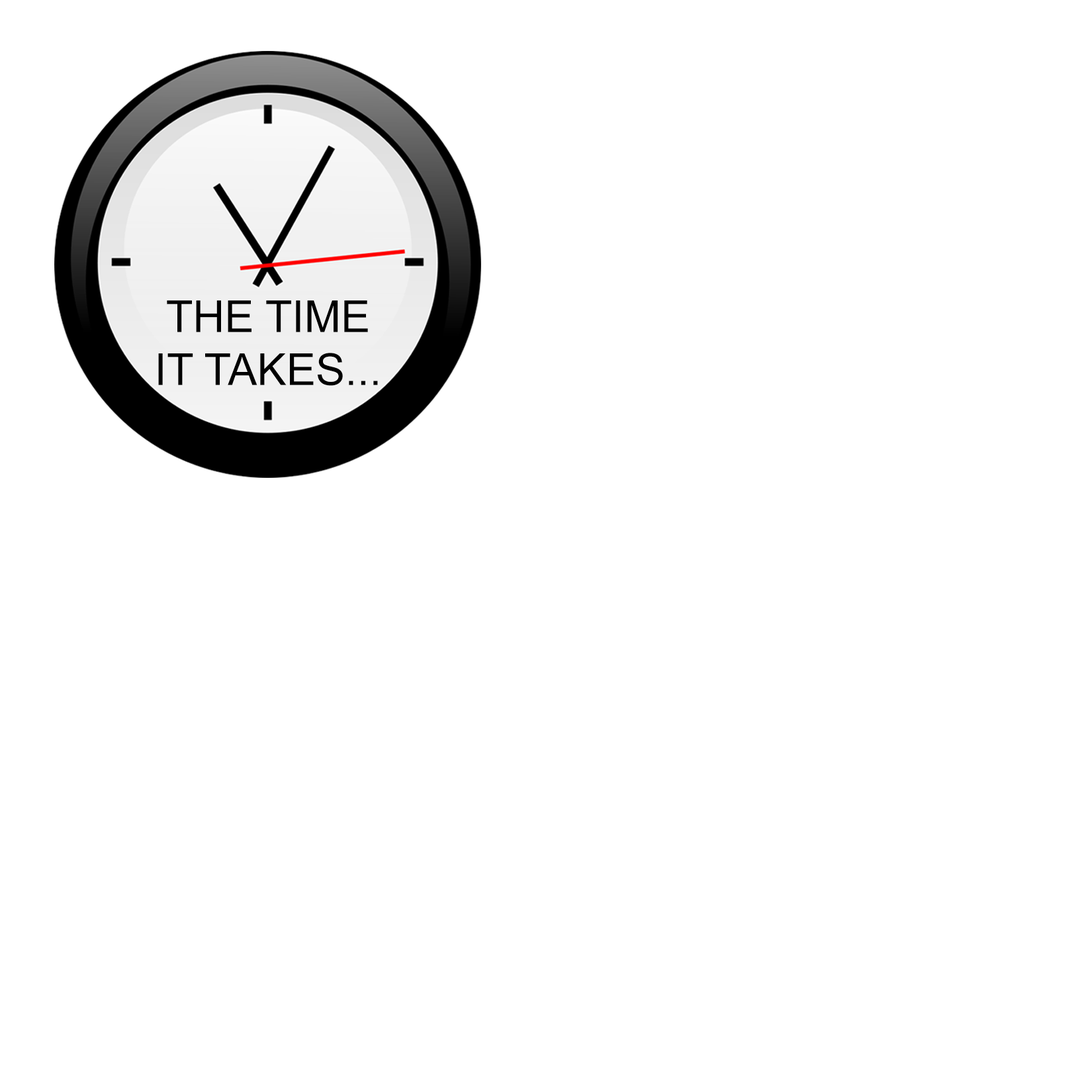
<style>
.page{position:relative;width:1092px;height:1092px;background:#ffffff}
.page>*{position:absolute;margin:0}
.t1{font:44.1px "ArialMT";color:#000000}
</style>
<div class="page">
<p class="t1" style="left:158px;top:300px;width:220px;height:86px;text-align:center">THE TIME<br>IT TAKES...</p>
</div>
